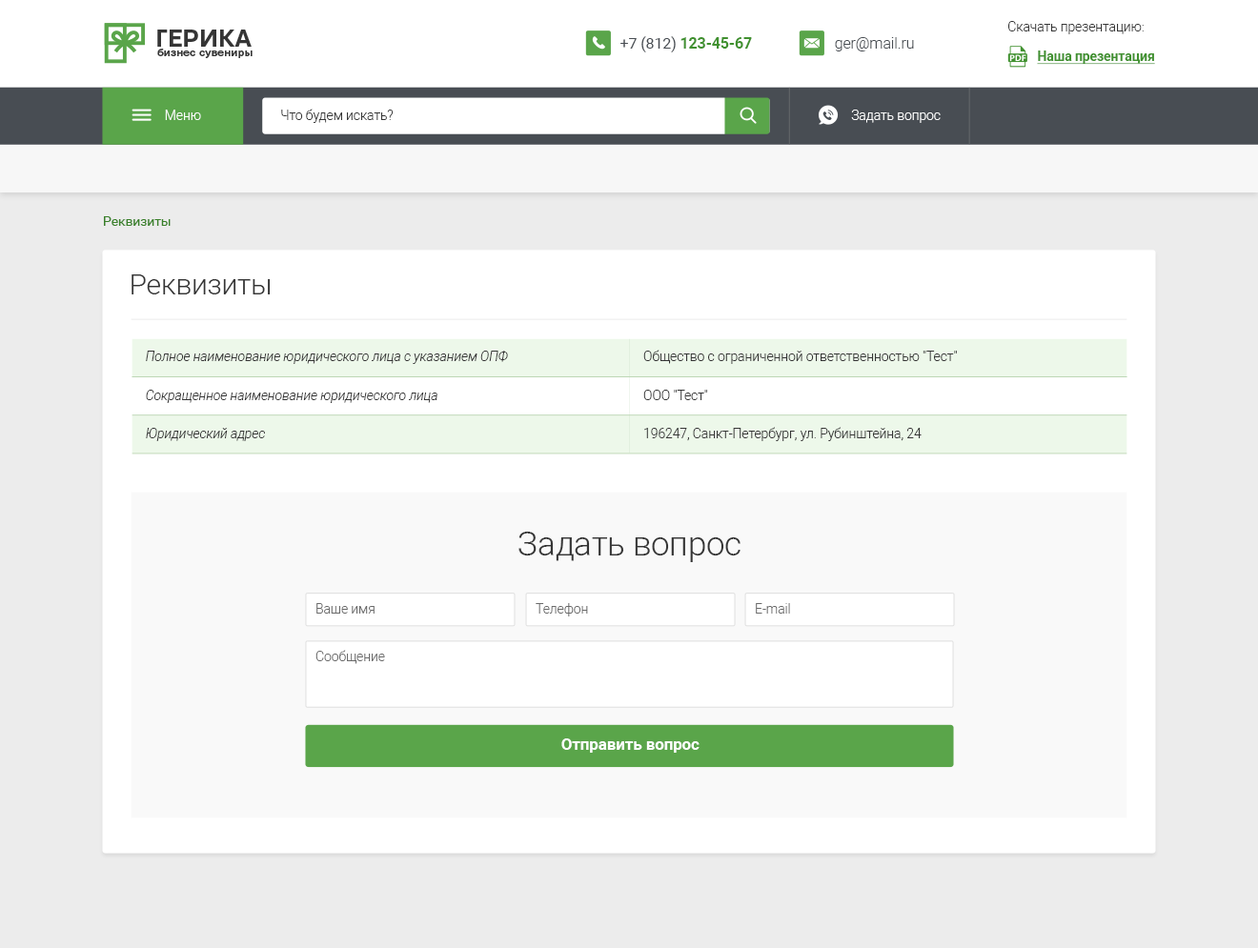
<style>
.page{position:relative;width:1258px;height:948px;background:#ffffff}
.page>*{position:absolute;margin:0}
.t1{font:13.4px "Roboto-Light";letter-spacing:-0.01em;color:#353535}
.t2{font:15.3px "Roboto-Bold";letter-spacing:-0.01em;color:#40912f}
.t3{font:15.3px "Roboto-Regular";letter-spacing:-0.01em;color:#484d53}
.t4{font:15.3px "Roboto-Light";letter-spacing:-0.01em;color:#484d53}
.t5{font:13.4px "Roboto-Bold";letter-spacing:-0.01em;color:#40912f;text-decoration:underline}
.t6{font:13.4px "Roboto-Light";letter-spacing:-0.01em;color:#ffffff}
.t7{font:13.4px "Roboto-Regular";letter-spacing:-0.01em;color:#3a812a}
.t8{font:28.7px "Roboto-Light";letter-spacing:-0.01em;color:#353535}
.t9{font:13.4px "Roboto-LightItalic";letter-spacing:-0.01em;color:#353535}
.t10{font:33.5px "Roboto-Light";letter-spacing:-0.01em;color:#353535}
.t11{font:13.4px "Roboto-Light";letter-spacing:-0.01em;color:#6a6a6a}
.t12{font:16.3px "Roboto-Bold";letter-spacing:-0.01em;color:#ffffff}
</style>
<div class="page">
<p class="t1" style="left:1008px;top:21px;width:135px;height:13px">Скачать презентацию:</p>
<p class="t2" style="left:620px;top:36px;width:132px;height:16px"><span class="t3">+7 (812)</span> 123-45-67</p>
<p class="t4" style="left:835px;top:37px;width:79px;height:14px">ger@mail.ru</p>
<p class="t5" style="left:1037px;top:51px;width:118px;height:14px">Наша презентация</p>
<p class="t6" style="left:165px;top:110px;width:36px;height:10px">Меню</p>
<p class="t1" style="left:281px;top:109px;width:113px;height:14px">Что будем искать?</p>
<p class="t6" style="left:851px;top:110px;width:89px;height:13px">Задать вопрос</p>
<p class="t7" style="left:104px;top:216px;width:67px;height:10px">Реквизиты</p>
<p class="t8" style="left:131px;top:274px;width:140px;height:20px">Реквизиты</p>
<p class="t9" style="left:146px;top:351px;width:362px;height:13px">Полное наименование юридического лица с указанием ОПФ</p>
<p class="t1" style="left:643px;top:350px;width:314px;height:14px">Общество с ограниченной ответственностью "Тест"</p>
<p class="t9" style="left:146px;top:390px;width:291px;height:13px">Сокращенное наименование юридического лица</p>
<p class="t1" style="left:643px;top:390px;width:65px;height:10px">ООО "Тест"</p>
<p class="t9" style="left:146px;top:428px;width:119px;height:13px">Юридический адрес</p>
<p class="t1" style="left:644px;top:427px;width:277px;height:14px">196247, Санкт-Петербург, ул. Рубинштейна, 24</p>
<p class="t10" style="left:518px;top:532px;width:222px;height:30px">Задать вопрос</p>
<p class="t11" style="left:316px;top:603px;width:58px;height:11px">Ваше имя</p>
<p class="t11" style="left:535px;top:603px;width:53px;height:13px">Телефон</p>
<p class="t11" style="left:756px;top:603px;width:34px;height:11px">E-mail</p>
<p class="t11" style="left:315px;top:650px;width:70px;height:14px">Сообщение</p>
<p class="t12" style="left:561px;top:738px;width:138px;height:15px">Отправить вопрос</p>
</div>
